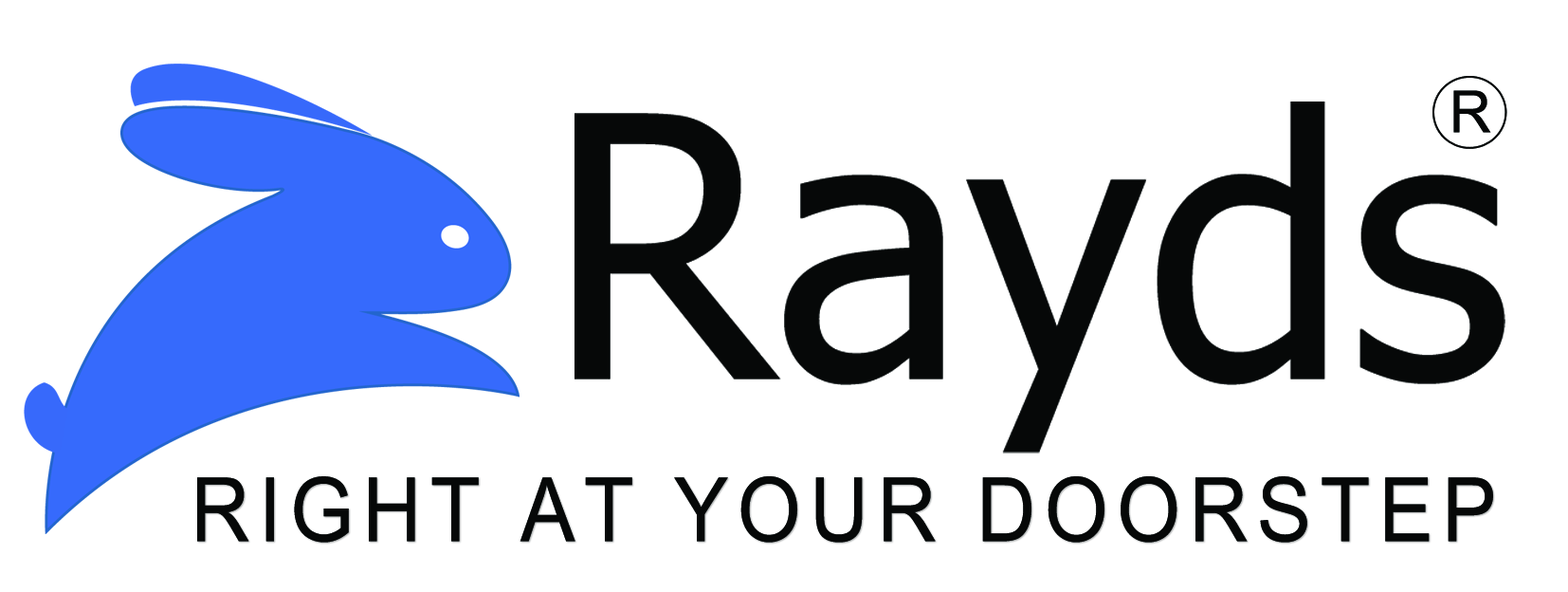
<style>
.page{position:relative;width:1568px;height:592px;background:#ffffff}
.page>*{position:absolute;margin:0}
.t1{font:58.1px "ArialMT";letter-spacing:0.11em;color:#060808;text-transform:uppercase}
.t2{font:88.7px "ArialMT";letter-spacing:0.11em;color:#060808;text-transform:uppercase;scale:0.92 1}
</style>
<div class="page">
<p class="t1" style="left:1453px;top:90px;width:38px;height:43px">r</p>
<p class="t2" style="left:197px;top:476px;width:1296px;height:66px">RIGHT AT YOUR DOORSTEP</p>
</div>
